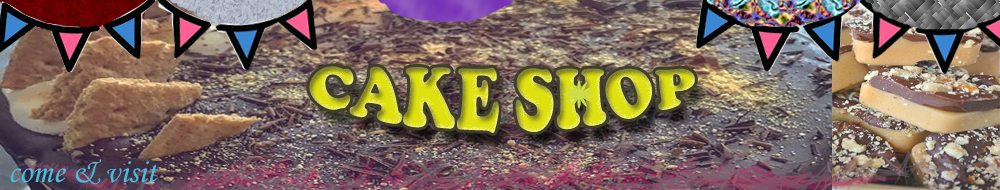
<style>
.page{position:relative;width:1000px;height:190px}
.page>*{position:absolute;margin:0}
.t1{font:58.3px "CooperBlack"}
.t2{font:33.3px "MonotypeCorsiva";color:#49bcdd}
</style>
<div class="page">
<p class="t1" style="left:309px;top:66px;width:386px;height:67px">CAKE SHOP</p>
<p class="t2" style="left:10px;top:159px;width:149px;height:26px">come &amp; visit</p>
</div>
